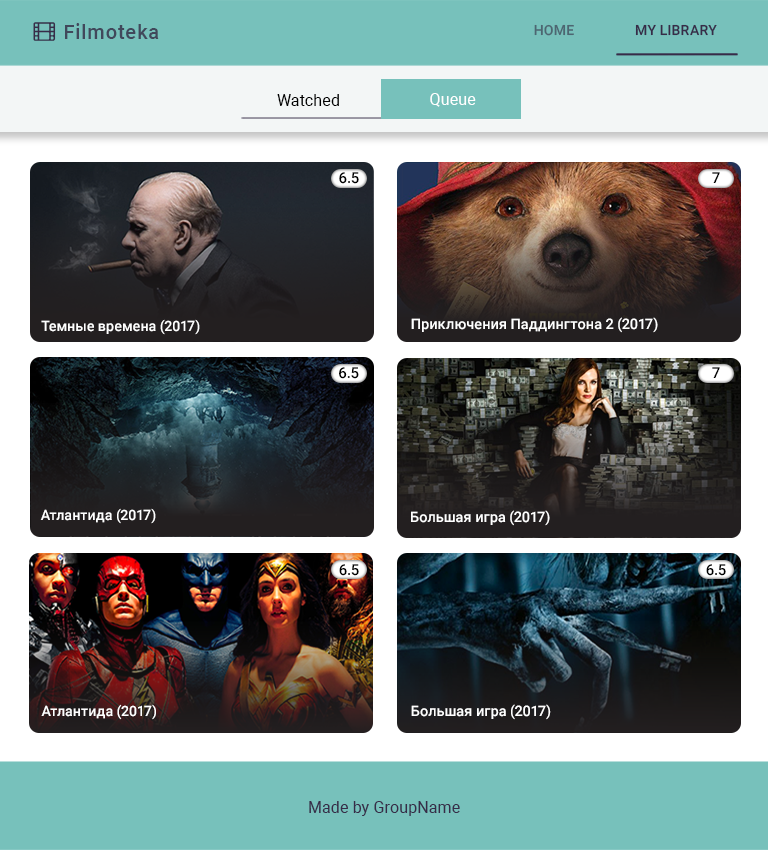
<style>
.page{position:relative;width:768px;height:850px}
.page>*{position:absolute;margin:0}
.t1{font:20px "Roboto-Medium";letter-spacing:0.05em;color:#41485b}
.t2{font:14px "Roboto-Medium";letter-spacing:0.01em;color:#4d6671;text-transform:uppercase}
.t3{font:14px "Roboto-Medium";letter-spacing:0.01em;color:#372c48;text-transform:uppercase}
.t4{font:16px "Roboto-Regular";letter-spacing:0.01em;color:#000000}
.t5{font:16px "Roboto-Regular";letter-spacing:0.01em;color:#ffffff}
.t6{font:15px "Roboto-Medium";color:#000000}
.t7{font:15px/14px "Roboto-Medium";color:#000000}
.t8{font:14.4px "Roboto-Medium";color:#ffffff}
.t9{font:14.2px "Roboto-Medium";color:#ffffff}
.t10{font:16px "Roboto-Regular";letter-spacing:0.01em;color:#372c48}
</style>
<div class="page">
<p class="t1" style="left:65px;top:23px;width:94px;height:16px">Filmoteka</p>
<p class="t2" style="left:534px;top:24px;width:40px;height:12px">Home</p>
<p class="t3" style="left:635px;top:24px;width:82px;height:12px">my library</p>
<p class="t4" style="left:277px;top:94px;width:62px;height:12px">Watched</p>
<p class="t5" style="left:430px;top:93px;width:46px;height:14px">Queue</p>
<p class="t5" style="left:430px;top:93px;width:46px;height:14px">Queue</p>
<p class="t6" style="left:339px;top:172px;width:20px;height:12px">6.5</p>
<p class="t7" style="left:712px;top:172px;width:8px;height:11px;text-align:center">7<br>.5</p>
<p class="t8" style="left:411px;top:317px;width:247px;height:16px">Приключения Паддингтона 2 (2017)</p>
<p class="t9" style="left:41px;top:319px;width:159px;height:16px">Темные времена (2017)</p>
<p class="t6" style="left:339px;top:367px;width:20px;height:12px">6.5</p>
<p class="t7" style="left:712px;top:367px;width:8px;height:11px;text-align:center">7<br>.5</p>
<p class="t9" style="left:40px;top:508px;width:116px;height:16px">Атлантида (2017)</p>
<p class="t8" style="left:411px;top:510px;width:139px;height:16px">Большая игра (2017)</p>
<p class="t6" style="left:339px;top:564px;width:20px;height:12px">6.5</p>
<p class="t6" style="left:706px;top:564px;width:20px;height:12px">6.5</p>
<p class="t9" style="left:41px;top:704px;width:115px;height:16px">Атлантида (2017)</p>
<p class="t8" style="left:411px;top:704px;width:140px;height:16px">Большая игра (2017)</p>
<p class="t10" style="left:309px;top:801px;width:151px;height:15px">Made by GroupName</p>
</div>
